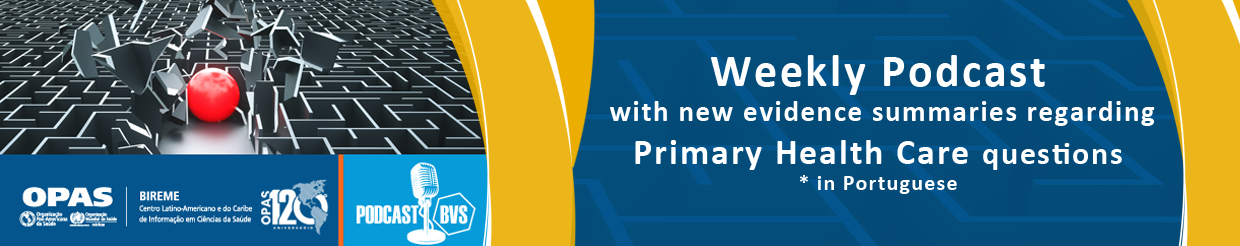
<style>
.page{position:relative;width:1240px;height:246px}
.page>*{position:absolute;margin:0}
.t1{font:29px "Calibri-Bold";letter-spacing:0.055em;color:#ffffff}
.t2{font:46px "Calibri-Bold";letter-spacing:0.055em;color:#ffffff}
.t3{font:36px "Calibri-Bold";letter-spacing:0.055em;color:#ffffff}
.t4{font:32px "Calibri-Bold";letter-spacing:0.055em;color:#ffffff}
.t5{font:22px "Calibri-Bold";letter-spacing:0.055em;color:#ffffff}
</style>
<div class="page">
<p class="t1" style="left:610px;top:55px;width:545px;height:139px;text-align:center"><span class="t2">Weekly Podcast<br></span> with new evidence summaries regarding<br><span class="t3">Primary Health Care </span><span class="t4">questions<br></span><span class="t5">* in Portuguese</span></p>
</div>
